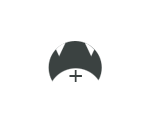
<style>
.page{position:relative;width:148px;height:120px;background:#ffffff}
.page>*{position:absolute;margin:0}
.t1{font:20.3px "Verdana";letter-spacing:-0.1em;color:#3b4241}
</style>
<div class="page">
<p class="t1" style="left:69px;top:70px;width:13px;height:12px">+</p>
</div>
